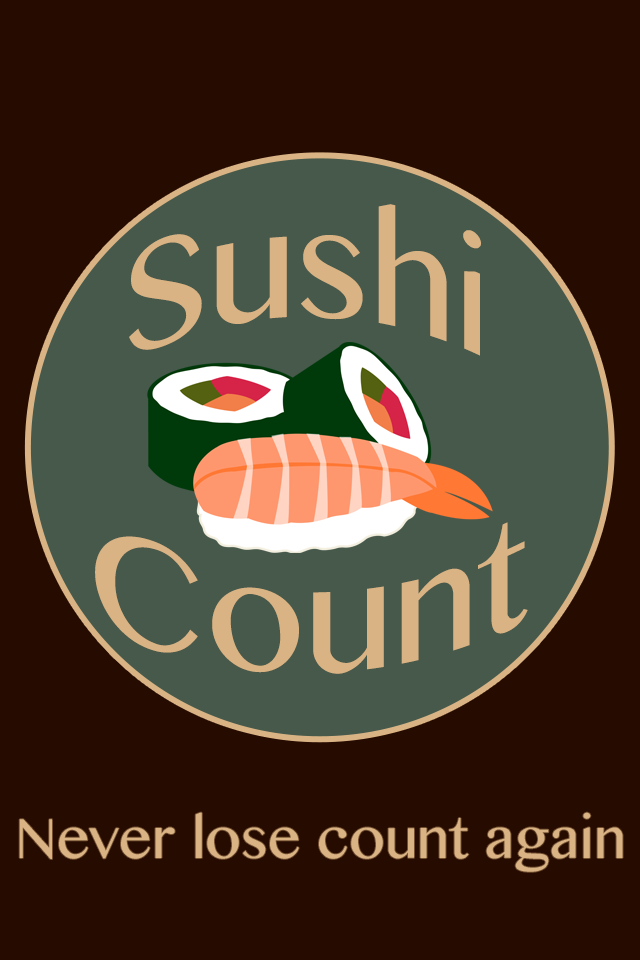
<style>
.page{position:relative;width:640px;height:960px;background:#260b01}
.page>*{position:absolute;margin:0}
.t1{font:168.8px "KannadaMN";color:#d9b384}
.t2{font:63.1px "KannadaMN";color:#d9b384}
</style>
<div class="page">
<p class="t1" style="left:129px;top:204px;width:352px;height:152px">Sushi</p>
<p class="t1" style="left:95px;top:522px;width:433px;height:152px">Count</p>
<p class="t2" style="left:19px;top:812px;width:604px;height:60px">Never lose count again</p>
</div>
